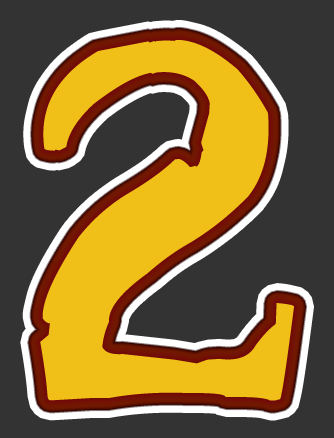
<style>
.page{position:relative;width:334px;height:438px;background:#333333}
.page>*{position:absolute;margin:0}
.t1{font:550px "PiecesofEight";letter-spacing:0.18em;color:#f0c018}
</style>
<div class="page">
<p class="t1" style="left:40px;top:40px;width:254px;height:361px">2</p>
</div>
